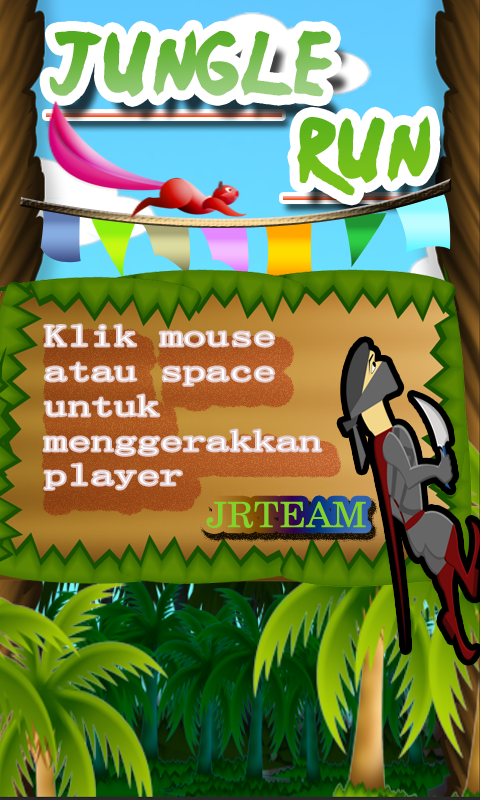
<style>
.page{position:relative;width:480px;height:800px}
.page>*{position:absolute;margin:0}
.t1{font:72px "Ninja-Naruto"}
.t2{font:29px "SimSun-ExtB";color:#ffffff;scale:1.6 1}
.t3{font:34.9px "CenturySchlbkCyrillicBT-Roman";color:#85d12c;scale:1.07 1}
</style>
<div class="page">
<p class="t1" style="left:49px;top:29px;width:382px;height:167px">jungle<br>                  run</p>
<p class="t2" style="left:44px;top:325px;width:277px;height:164px">Klik mouse<br>atau space <br>untuk <br>menggerakkan <br>player</p>
<p class="t3" style="left:206px;top:501px;width:160px;height:27px">JRTEAM</p>
</div>
